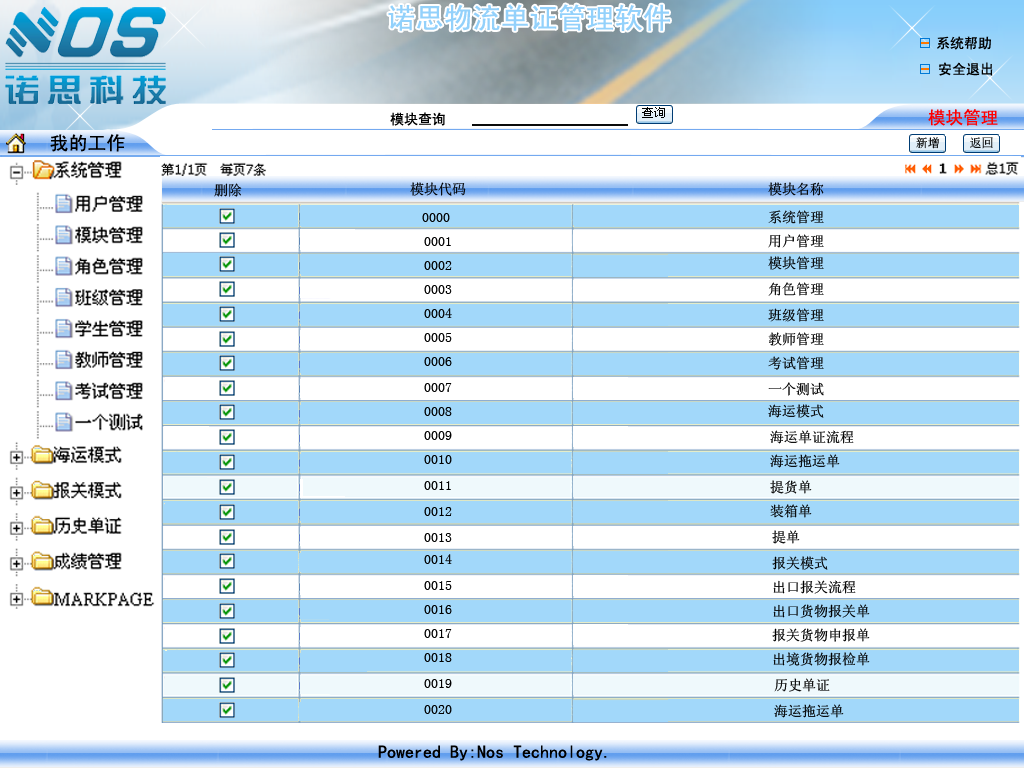
<style>
.page{position:relative;width:1024px;height:768px;background:#ffffff}
.page>*{position:absolute;margin:0}
.t1{font:28.4px "SimHei";color:#93d1fb}
.t2{font:14px "SimHei";color:#000000}
.t3{font:17.6px "SimHei";color:#ff0000}
.t4{font:19px "SimHei";color:#000000}
.t5{font:14px "SimSun";color:#000000}
.t6{font:14px "SimSun"}
.t7{font:18px "SimHei";color:#000000}
</style>
<div class="page">
<p class="t1" style="left:388px;top:4px;width:282px;height:27px">诺思物流单证管理软件</p>
<p class="t2" style="left:937px;top:36px;width:54px;height:14px">系统帮助</p>
<p class="t2" style="left:939px;top:62px;width:54px;height:14px">安全退出</p>
<p class="t2" style="left:390px;top:112px;width:55px;height:14px">模块查询</p>
<p class="t3" style="left:928px;top:109px;width:70px;height:17px">模块管理</p>
<p class="t4" style="left:50px;top:134px;width:75px;height:18px">我的工作</p>
<p class="t5" style="left:214px;top:183px;width:28px;height:14px">删除</p>
<p class="t5" style="left:410px;top:182px;width:56px;height:14px">模块代码</p>
<p class="t5" style="left:768px;top:182px;width:56px;height:14px">模块名称</p>
<p class="t5" style="left:768px;top:210px;width:56px;height:14px">系统管理</p>
<p class="t5" style="left:768px;top:234px;width:56px;height:14px">用户管理</p>
<p class="t6" style="left:768px;top:256px;width:56px;height:14px">模块管理</p>
<p class="t6" style="left:768px;top:282px;width:56px;height:14px">角色管理</p>
<p class="t6" style="left:768px;top:308px;width:56px;height:14px">班级管理</p>
<p class="t6" style="left:768px;top:332px;width:56px;height:14px">教师管理</p>
<p class="t6" style="left:768px;top:356px;width:56px;height:14px">考试管理</p>
<p class="t5" style="left:768px;top:382px;width:56px;height:14px">一个测试</p>
<p class="t5" style="left:768px;top:404px;width:56px;height:14px">海运模式</p>
<p class="t5" style="left:770px;top:430px;width:84px;height:14px">海运单证流程</p>
<p class="t5" style="left:770px;top:454px;width:70px;height:14px">海运拖运单</p>
<p class="t5" style="left:770px;top:480px;width:42px;height:14px">提货单</p>
<p class="t5" style="left:770px;top:504px;width:42px;height:14px">装箱单</p>
<p class="t5" style="left:772px;top:530px;width:28px;height:14px">提单</p>
<p class="t5" style="left:772px;top:556px;width:56px;height:14px">报关模式</p>
<p class="t5" style="left:773px;top:580px;width:83px;height:14px">出口报关流程</p>
<p class="t5" style="left:773px;top:604px;width:97px;height:14px">出口货物报关单</p>
<p class="t5" style="left:772px;top:628px;width:98px;height:14px">报关货物申报单</p>
<p class="t5" style="left:773px;top:652px;width:97px;height:14px">出境货物报检单</p>
<p class="t5" style="left:774px;top:678px;width:56px;height:14px">历史单证</p>
<p class="t5" style="left:774px;top:704px;width:70px;height:14px">海运拖运单</p>
<p class="t7" style="left:378px;top:745px;width:229px;height:16px">Powered By:Nos Technology.</p>
</div>
